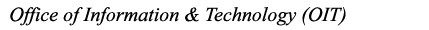
<style>
.page{position:relative;width:429px;height:30px;background:#ffffff}
.page>*{position:absolute;margin:0}
.t1{font:20px "TimesNewRomanPS-ItalicMT";color:#000000}
</style>
<div class="page">
<p class="t1" style="left:10px;top:7px;width:336px;height:19px">Office of Information &amp; Technology (OIT)</p>
</div>
